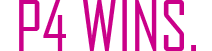
<style>
.page{position:relative;width:212px;height:51px;background:#ffffff}
.page>*{position:absolute;margin:0}
.t1{font:66.7px "AgencyFB-Reg";color:#ca0089}
</style>
<div class="page">
<p class="t1" style="left:19px;top:0px;width:177px;height:51px">P4 WINS.</p>
</div>
